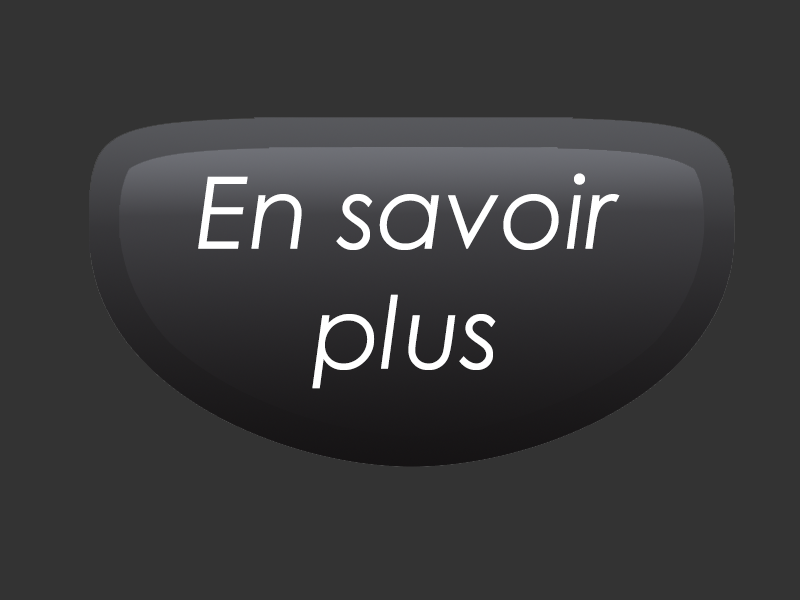
<style>
.page{position:relative;width:800px;height:600px;background:#333333}
.page>*{position:absolute;margin:0}
.t1{font:100px "CenturyGothic-Italic";color:#ffffff}
</style>
<div class="page">
<p class="t1" style="left:198px;top:173px;width:422px;height:216px;text-align:center">En savoir <br>plus</p>
</div>
